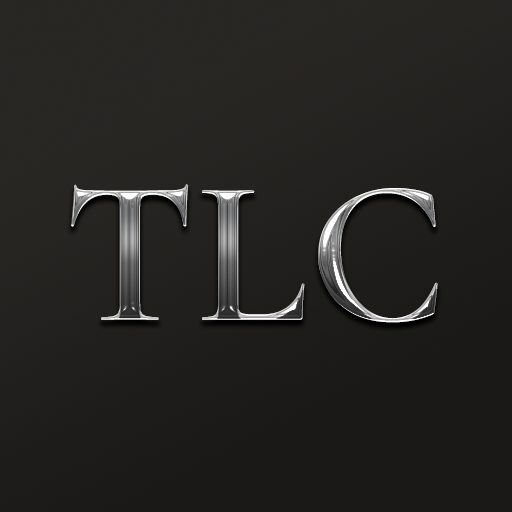
<style>
.page{position:relative;width:512px;height:512px}
.page>*{position:absolute;margin:0}
.t1{font:207px "CormorantSC-SemiBold"}
</style>
<div class="page">
<p class="t1" style="left:71px;top:184px;width:367px;height:139px">TLC</p>
</div>
